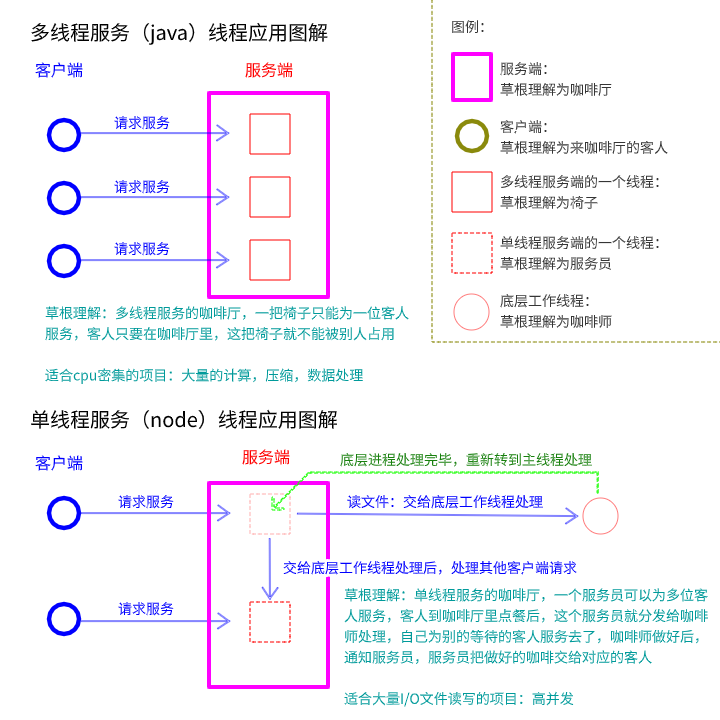
<style>
.page{position:relative;width:720px;height:720px;background:#ffffff}
.page>*{position:absolute;margin:0}
.t1{font:20px "SourceHanSansSC-Regular";color:#000000}
.t2{font:14px "SourceHanSansSC-Regular";color:#353535}
.t3{font:16px "SourceHanSansSC-Regular";color:#0000ff}
.t4{font:16px "SourceHanSansSC-Regular";color:#ff0000}
.t5{font:14px "SourceHanSansSC-Regular";color:#0000ff}
.t6{font:14px "SourceHanSansSC-Regular";color:#009a9a}
.t7{font:14px "SourceHanSansSC-Regular";color:#18800e}
</style>
<div class="page">
<p class="t1" style="left:31px;top:22px;width:297px;height:23px">多线程服务（java）线程应用图解</p>
<p class="t2" style="left:452px;top:20px;width:32px;height:14px">图例：</p>
<p class="t3" style="left:35px;top:62px;width:48px;height:16px">客户端</p>
<p class="t4" style="left:245px;top:62px;width:48px;height:16px">服务端</p>
<p class="t2" style="left:500px;top:62px;width:112px;height:34px">服务端：<br>草根理解为咖啡厅</p>
<p class="t5" style="left:114px;top:116px;width:56px;height:14px">请求服务</p>
<p class="t2" style="left:500px;top:120px;width:168px;height:34px">客户端：<br>草根理解为来咖啡厅的客人</p>
<p class="t5" style="left:114px;top:180px;width:56px;height:14px">请求服务</p>
<p class="t2" style="left:500px;top:175px;width:159px;height:34px">多线程服务端的一个线程：<br>草根理解为椅子</p>
<p class="t5" style="left:114px;top:242px;width:56px;height:14px">请求服务</p>
<p class="t2" style="left:500px;top:236px;width:159px;height:34px">单线程服务端的一个线程：<br>草根理解为服务员</p>
<p class="t2" style="left:500px;top:294px;width:112px;height:34px">底层工作线程：<br>草根理解为咖啡师</p>
<p class="t6" style="left:45px;top:306px;width:364px;height:78px">草根理解：多线程服务的咖啡厅，一把椅子只能为一位客人服务，客人只要在咖啡厅里，这把椅子就不能被别人占用<br><br>适合cpu密集的项目：大量的计算，压缩，数据处理</p>
<p class="t1" style="left:31px;top:409px;width:306px;height:20px">单线程服务（node）线程应用图解</p>
<p class="t4" style="left:242px;top:449px;width:48px;height:16px">服务端</p>
<p class="t3" style="left:35px;top:455px;width:48px;height:16px">客户端</p>
<p class="t7" style="left:340px;top:453px;width:252px;height:14px">底层进程处理完毕，重新转到主线程处理</p>
<p class="t5" style="left:118px;top:495px;width:56px;height:14px">请求服务</p>
<p class="t5" style="left:347px;top:495px;width:196px;height:14px">读文件：交给底层工作线程处理</p>
<p class="t5" style="left:283px;top:561px;width:294px;height:14px">交给底层工作线程处理后，处理其他客户端请求</p>
<p class="t6" style="left:344px;top:588px;width:364px;height:119px">草根理解：单线程服务的咖啡厅，一个服务员可以为多位客人服务，客人到咖啡厅里点餐后，这个服务员就分发给咖啡师处理，自己为别的等待的客人服务去了，咖啡师做好后，通知服务员，服务员把做好的咖啡交给对应的客人<br><br>适合大量I/O文件读写的项目：高并发</p>
<p class="t5" style="left:118px;top:602px;width:56px;height:14px">请求服务</p>
</div>
